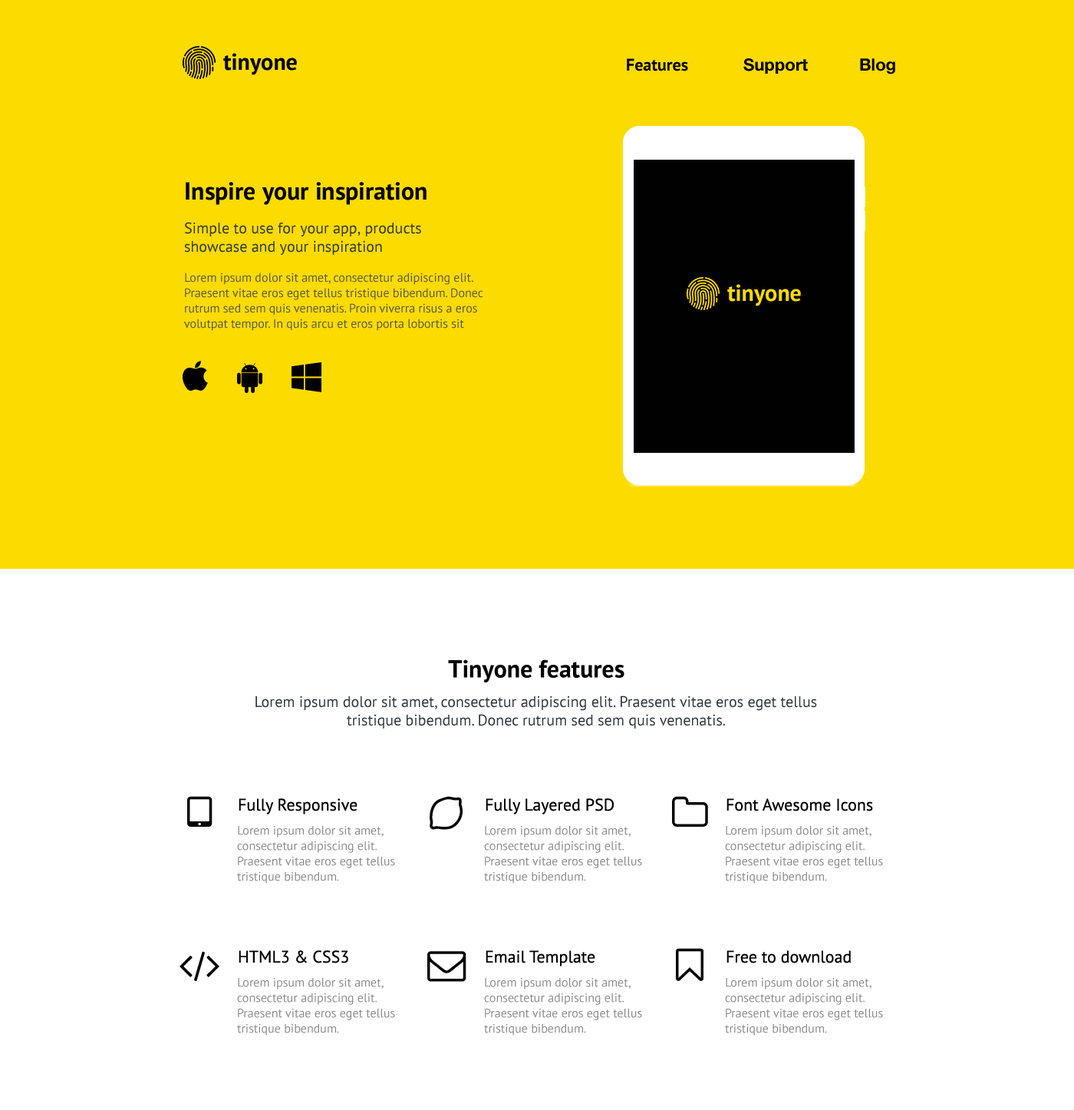
<style>
.page{position:relative;width:1074px;height:1110px;background:#ffffff}
.page>*{position:absolute;margin:0}
.t1{font:23px "PTSans-Bold";color:#010101}
.t2{font:16.9px "PTSans-Bold";color:#010101}
.t3{font:16.9px "HelveticaNeue-Bold";color:#010101}
.t4{font:24.6px "PTSans-Bold";color:#010101}
.t5{font:15.3px/18.4px "PTSans-Regular";color:#313841}
.t6{font:12.3px/15.3px "PTSans-Regular";color:#555555}
.t7{font:23px "PTSans-Bold";color:#fcdb00}
.t8{font:16.9px "PTSans-Regular";color:#010101}
.t9{font:12.3px/15.3px "PTSans-Regular";color:#898989}
</style>
<div class="page">
<p class="t1" style="left:223px;top:53px;width:74px;height:22px">tinyone</p>
<p class="t2" style="left:627px;top:58px;width:61px;height:13px">Features</p>
<p class="t3" style="left:744px;top:58px;width:64px;height:16px">Support</p>
<p class="t3" style="left:860px;top:58px;width:36px;height:16px">Blog</p>
<p class="t4" style="left:186px;top:182px;width:241px;height:23px">Inspire your inspiration</p>
<p class="t5" style="left:184px;top:222px;width:237px;height:33px">Simple to use for your app, products showcase and your inspiration</p>
<p class="t6" style="left:184px;top:272px;width:300px;height:59px">Lorem ipsum dolor sit amet, consectetur adipiscing elit. Praesent vitae eros eget tellus tristique bibendum. Donec rutrum sed sem quis venenatis. Proin viverra risus a eros volutpat tempor. In quis arcu et eros porta lobortis sit</p>
<p class="t7" style="left:728px;top:284px;width:73px;height:22px">tinyone</p>
<p class="t4" style="left:448px;top:659px;width:177px;height:23px">Tinyone features</p>
<p class="t5" style="left:256px;top:695px;width:561px;height:33px;text-align:center">Lorem ipsum dolor sit amet, consectetur adipiscing elit. Praesent vitae eros eget tellus tristique bibendum. Donec rutrum sed sem quis venenatis.</p>
<p class="t8" style="left:239px;top:798px;width:119px;height:16px">Fully Responsive</p>
<p class="t8" style="left:486px;top:798px;width:128px;height:16px">Fully Layered PSD</p>
<p class="t8" style="left:727px;top:798px;width:146px;height:13px">Font Awesome Icons</p>
<p class="t9" style="left:237px;top:826px;width:158px;height:57px">Lorem ipsum dolor sit amet, consectetur adipiscing elit. Praesent vitae eros eget tellus tristique bibendum.</p>
<p class="t9" style="left:484px;top:826px;width:158px;height:57px">Lorem ipsum dolor sit amet, consectetur adipiscing elit. Praesent vitae eros eget tellus tristique bibendum.</p>
<p class="t9" style="left:725px;top:826px;width:158px;height:57px">Lorem ipsum dolor sit amet, consectetur adipiscing elit. Praesent vitae eros eget tellus tristique bibendum.</p>
<p class="t8" style="left:239px;top:950px;width:109px;height:13px">HTML3 &amp; CSS3</p>
<p class="t8" style="left:486px;top:950px;width:110px;height:16px">Email Template</p>
<p class="t8" style="left:727px;top:950px;width:124px;height:13px">Free to download</p>
<p class="t9" style="left:237px;top:978px;width:158px;height:57px">Lorem ipsum dolor sit amet, consectetur adipiscing elit. Praesent vitae eros eget tellus tristique bibendum.</p>
<p class="t9" style="left:484px;top:978px;width:158px;height:57px">Lorem ipsum dolor sit amet, consectetur adipiscing elit. Praesent vitae eros eget tellus tristique bibendum.</p>
<p class="t9" style="left:725px;top:978px;width:158px;height:57px">Lorem ipsum dolor sit amet, consectetur adipiscing elit. Praesent vitae eros eget tellus tristique bibendum.</p>
</div>
